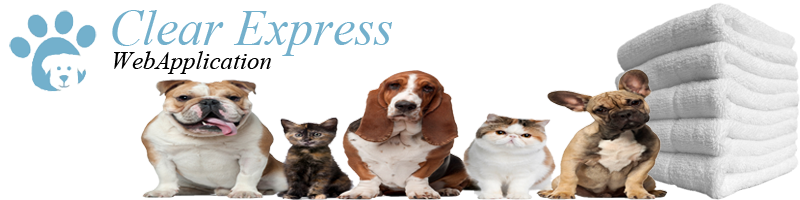
<style>
.page{position:relative;width:800px;height:200px;background:#ffffff}
.page>*{position:absolute;margin:0}
.t1{font:50px "TimesNewRomanPS-ItalicMT";color:#73b0cc}
.t2{font:25px "TimesNewRomanPS-ItalicMT";color:#000000}
</style>
<div class="page">
<p class="t1" style="left:112px;top:10px;width:280px;height:46px">Clear Express</p>
<p class="t2" style="left:114px;top:51px;width:157px;height:23px">WebApplication</p>
</div>
